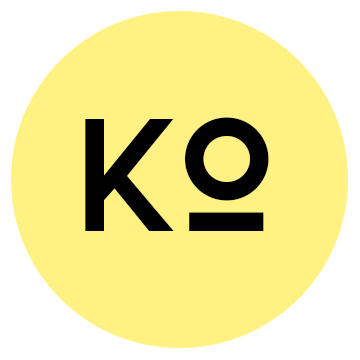
<style>
.page{position:relative;width:360px;height:360px;background:#fff282}
.page>*{position:absolute;margin:0}
.t1{font:160px "BaronNeue";color:#000000}
</style>
<div class="page">
<p class="t1" style="left:85px;top:117px;width:184px;height:114px">KO</p>
</div>
